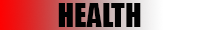
<style>
.page{position:relative;width:200px;height:30px;background:#010101}
.page>*{position:absolute;margin:0}
.t1{font:30px "Impact";color:#010101}
</style>
<div class="page">
<p class="t1" style="left:58px;top:3px;width:83px;height:24px">HEALTH</p>
</div>
